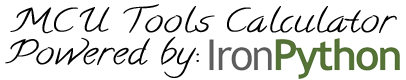
<style>
.page{position:relative;width:406px;height:80px;background:#ffffff}
.page>*{position:absolute;margin:0}
.t1{font:32px "Calligraffiti";color:#000000;scale:1.35 1}
</style>
<div class="page">
<p class="t1" style="left:10px;top:4px;width:387px;height:30px">MCU Tools Calculator</p>
<p class="t1" style="left:5px;top:36px;width:194px;height:42px">Powered by:</p>
</div>
